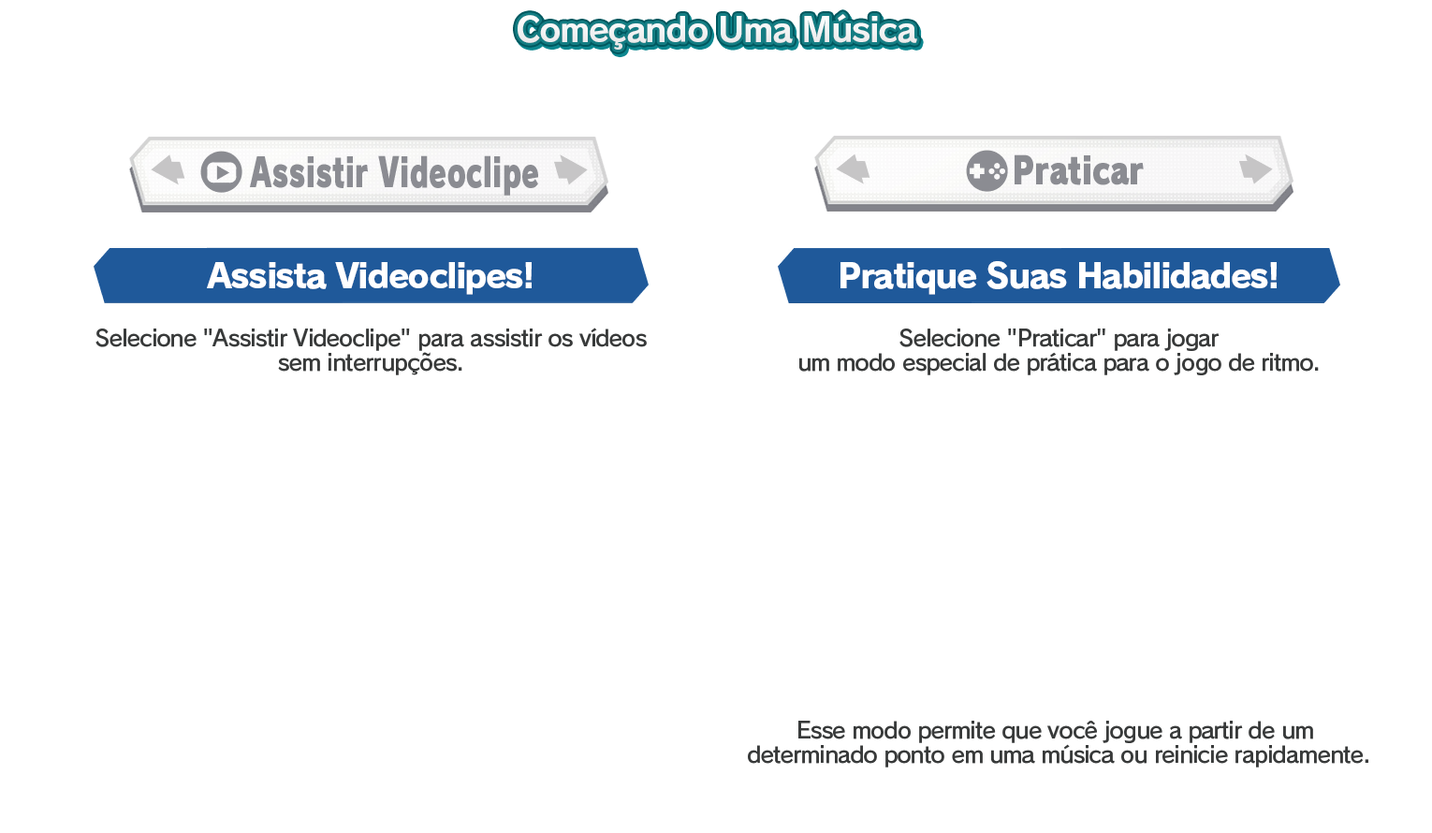
<style>
.page{position:relative;width:1432px;height:833px;background:#ffffff}
.page>*{position:absolute;margin:0}
.t1{font:33.7px "RodinPro-B";letter-spacing:-0.039em;color:#f2f2f3}
.t2{font:33.7px "RodinPro-EB";letter-spacing:-0.048em;color:#ffffff}
.t3{font:22.5px/23.7px "RodinPro-DB";letter-spacing:-0.04em;color:#383a3a}
</style>
<div class="page">
<p class="t1" style="left:517px;top:14px;width:400px;height:36px">Começando Uma Música</p>
<p class="t2" style="left:207px;top:262px;width:325px;height:33px">Assista Videoclipes!</p>
<p class="t2" style="left:840px;top:261px;width:436px;height:34px">Pratique Suas Habilidades!</p>
<p class="t3" style="left:95px;top:328px;width:552px;height:47px;text-align:center">Selecione "Assistir Videoclipe" para assistir os vídeos<br>sem interrupções.</p>
<p class="t3" style="left:799px;top:328px;width:520px;height:47px;text-align:center">Selecione "Praticar" para jogar<br>um modo especial de prática para o jogo de ritmo.</p>
<p class="t3" style="left:748px;top:721px;width:620px;height:46px;text-align:center">Esse modo permite que você jogue a partir de um <br>determinado ponto em uma música ou reinicie rapidamente.</p>
</div>
